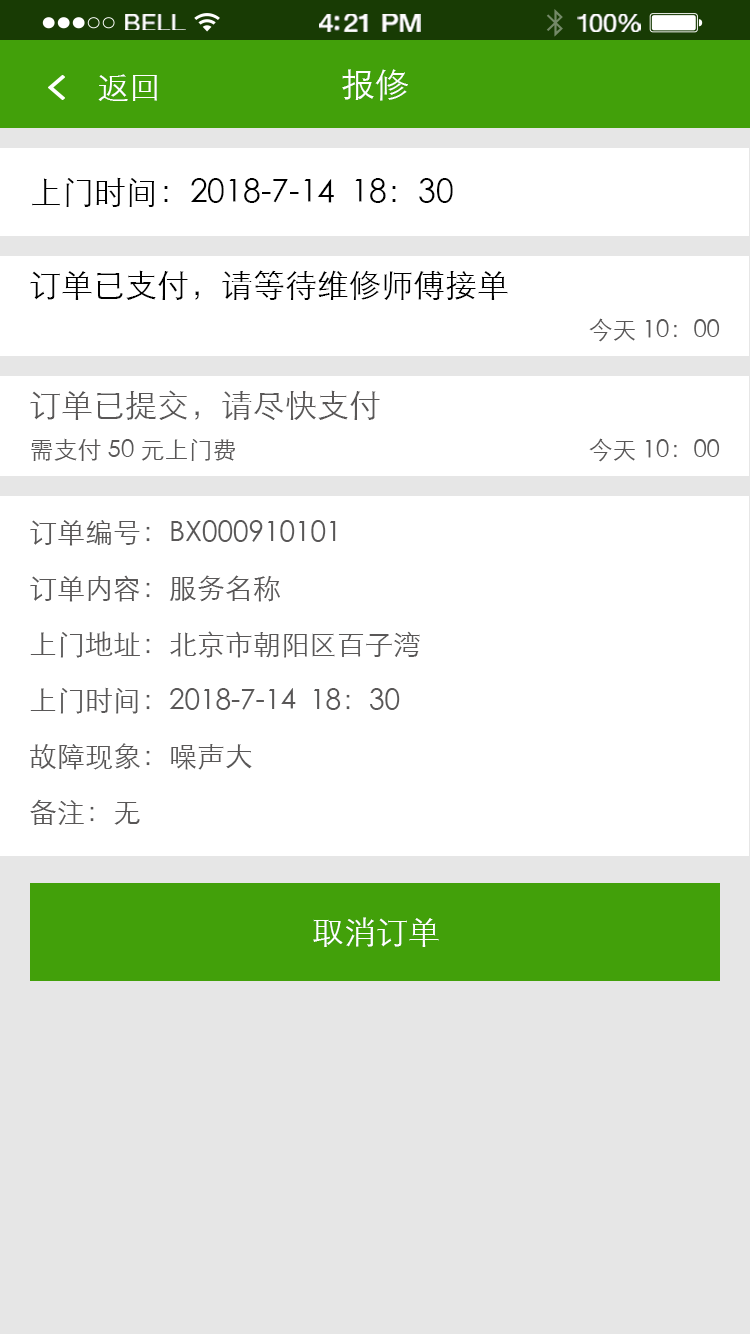
<style>
.page{position:relative;width:750px;height:1334px;background:#ffffff}
.page>*{position:absolute;margin:0}
.t1{font:23.3px "HelveticaNeue";letter-spacing:0.02em;color:#ffffff;scale:1.06 1}
.t2{font:25.3px "HelveticaNeue-Medium";letter-spacing:-0.02em;color:#ffffff;scale:1.06 1}
.t3{font:24.3px "HelveticaNeue";letter-spacing:-0.02em;color:#ffffff;scale:1.06 1}
.t4{font:32px "STXihei";color:#ffffff}
.t5{font:34px "STXihei";color:#ffffff}
.t6{font:32px "STXihei";color:#000000}
.t7{font:24px "STXihei";color:#595757}
.t8{font:32px "STXihei";color:#595757}
.t9{font:28px/56px "STXihei";color:#595757}
</style>
<div class="page">
<p class="t1" style="left:125px;top:14px;width:61px;height:16px">BELL</p>
<p class="t2" style="left:319px;top:14px;width:102px;height:18px">4:21 PM</p>
<p class="t3" style="left:577px;top:14px;width:64px;height:18px">100%</p>
<p class="t4" style="left:98px;top:74px;width:59px;height:27px">返回</p>
<p class="t5" style="left:342px;top:69px;width:66px;height:32px">报修</p>
<p class="t6" style="left:32px;top:177px;width:421px;height:30px">上门时间：2018-7-14  18：30</p>
<p class="t6" style="left:30px;top:270px;width:478px;height:30px">订单已支付，请等待维修师傅接单</p>
<p class="t7" style="left:589px;top:318px;width:131px;height:24px">今天 10：00</p>
<p class="t8" style="left:30px;top:390px;width:350px;height:30px">订单已提交，请尽快支付</p>
<p class="t7" style="left:31px;top:438px;width:204px;height:23px">需支付 50 元上门费</p>
<p class="t7" style="left:589px;top:438px;width:131px;height:24px">今天 10：00</p>
<p class="t9" style="left:30px;top:520px;width:390px;height:305px">订单编号：BX000910101<br>订单内容：服务名称<br>上门地址：北京市朝阳区百子湾<br>上门时间：2018-7-14  18：30<br>故障现象：噪声大<br>备注：无</p>
<p class="t4" style="left:313px;top:917px;width:126px;height:30px">取消订单</p>
</div>
